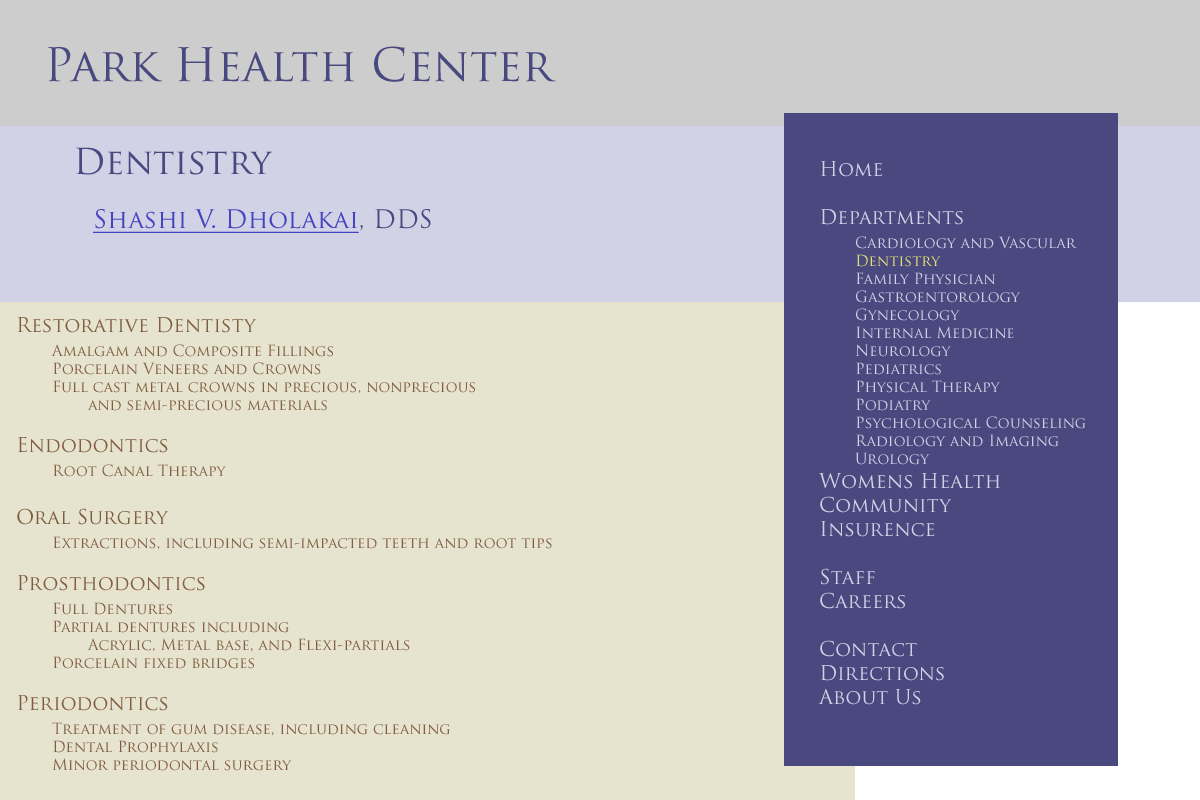
<style>
.page{position:relative;width:1200px;height:800px;background:#e6e3cf}
.page>*{position:absolute;margin:0}
.t1{font:45px "TrajanPro-Regular";color:#494980}
.t2{font:35px "TrajanPro-Regular";color:#494980}
.t3{font:15px "TrajanPro-Regular";color:#d2d2e6}
.t4{font:20px "TrajanPro-Regular";color:#d2d2e6}
.t5{font:15px "TrajanPro-Regular";color:#e6e073}
.t6{font:25px "TrajanPro-Regular";color:#4444bf;text-decoration:underline}
.t7{font:25px "TrajanPro-Regular";color:#494980}
.t8{font:15px "TrajanPro-Regular";color:#805d40}
.t9{font:20px "TrajanPro-Regular";color:#805d40}
</style>
<div class="page">
<p class="t1" style="left:48px;top:46px;width:508px;height:36px">Park Health Center</p>
<p class="t2" style="left:76px;top:147px;width:197px;height:28px">Dentistry</p>
<p class="t3" style="left:818px;top:161px;width:268px;height:544px"><span class="t4">Home<br><br>Departments<br> </span>Cardiology and Vascular<br> <span class="t5">Dentistry<br></span> Family Physician<br> Gastroentorology<br> Gynecology<br> Internal Medicine<br> Neurology<br> Pediatrics<br> Physical Therapy<br> Podiatry<br> Psychological Counseling<br> Radiology and Imaging<br> Urology<br><span class="t4">Womens Health<br>Community<br>Insurence<br><br>Staff<br>Careers<br><br>Contact<br>Directions<br>About Us</span></p>
<p class="t6" style="left:93px;top:209px;width:338px;height:24px">Shashi V. Dholakai<span class="t7">, DDS</span></p>
<p class="t8" style="left:17px;top:317px;width:535px;height:454px"><span class="t9">Restorative Dentisty<br> </span>Amalgam and Composite Fillings<br> Porcelain Veneers and Crowns<br> Full cast metal crowns in precious, nonprecious <br>  and semi-precious materials<br><br><span class="t9">Endodontics<br> </span>Root Canal Therapy<br><span class="t9"><br>Oral Surgery<br> </span>Extractions, including semi-impacted teeth and root tips<br><br><span class="t9">Prosthodontics<br> </span>Full Dentures<br> Partial dentures including<br>  Acrylic, Metal base, and Flexi-partials<br> Porcelain fixed bridges<br><br><span class="t9">Periodontics<br> </span>Treatment of gum disease, including cleaning<br> Dental Prophylaxis<br> Minor periodontal surgery</p>
</div>
